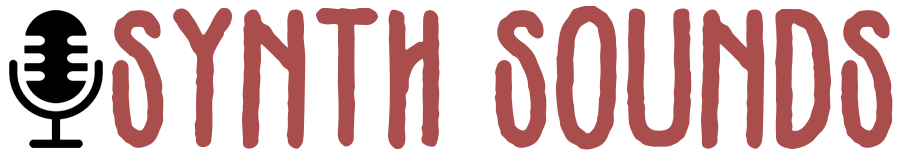
<style>
.page{position:relative;width:900px;height:150px;background:#ffffff}
.page>*{position:absolute;margin:0}
.t1{font:200px "Vintages";color:#aa4d4d}
</style>
<div class="page">
<p class="t1" style="left:111px;top:5px;width:782px;height:145px">Synth Sounds</p>
</div>
